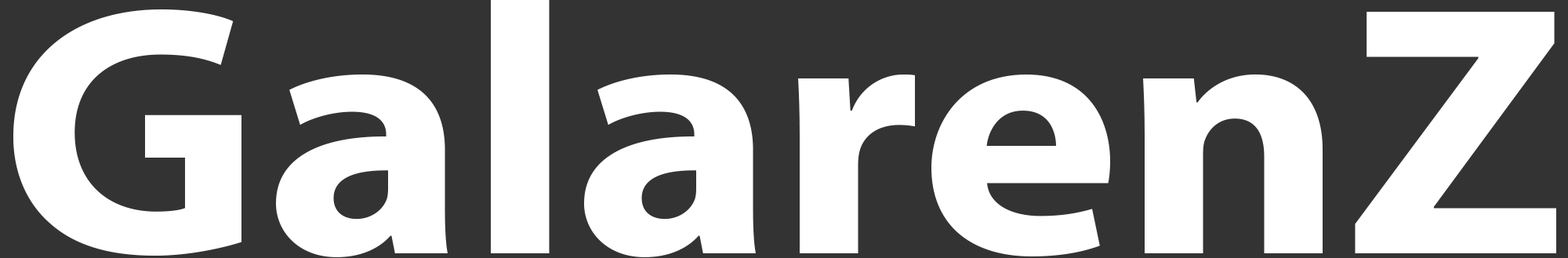
<style>
.page{position:relative;width:1568px;height:258px;background:#333333}
.page>*{position:absolute;margin:0}
.t1{font:357.9px "MyriadPro-Bold";color:#ffffff;scale:1.07 1}
</style>
<div class="page">
<p class="t1" style="left:13px;top:0px;width:1543px;height:257px">GalarenZ</p>
</div>
